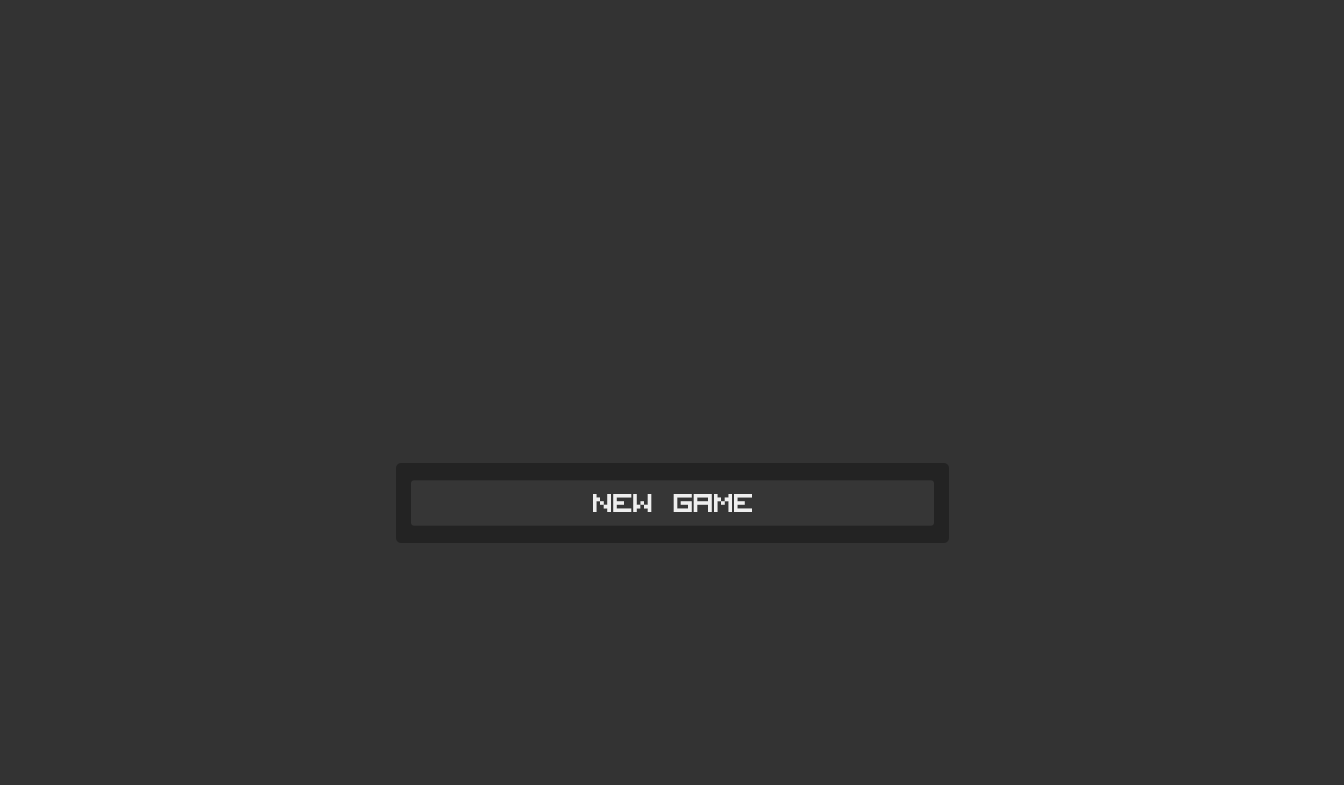
<style>
.page{position:relative;width:1344px;height:785px;background:#333333}
.page>*{position:absolute;margin:0}
.t1{font:36px "VisitorTT1BRK";letter-spacing:-0.04em;color:#ffffff}
</style>
<div class="page">
<p class="t1" style="left:593px;top:494px;width:159px;height:18px;opacity:0.9">NEW GAME</p>
</div>
